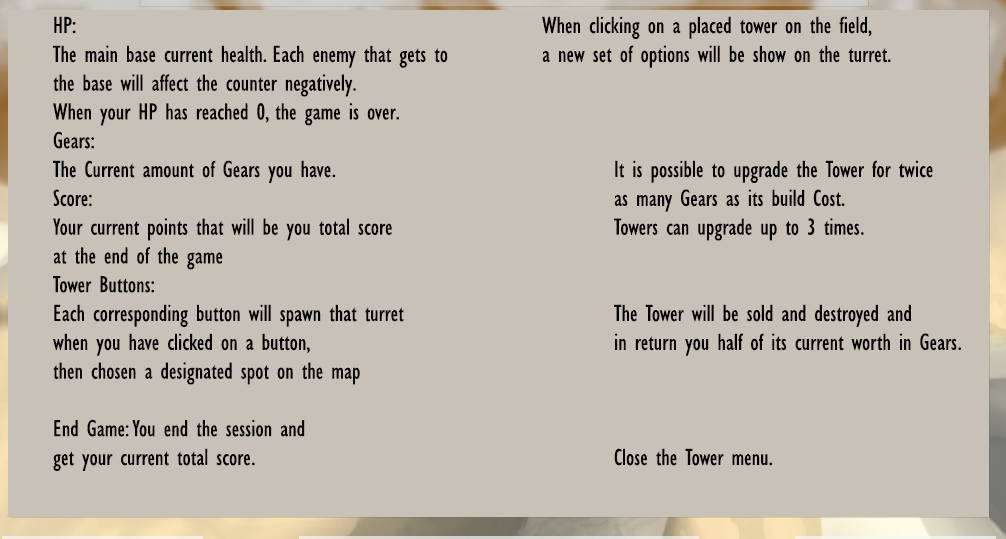
<style>
.page{position:relative;width:1006px;height:539px;background:#c8c1b7}
.page>*{position:absolute;margin:0}
.t1{font:24px "GillSansMT-Condensed";color:#000000}
</style>
<div class="page">
<p class="t1" style="left:53px;top:16px;width:395px;height:455px">HP: <br>The main base current health. Each enemy that gets to <br>the base will affect the counter negatively. <br>When your HP has reached 0, the game is over.<br>Gears: <br>The Current amount of Gears you have.<br>Score: <br>Your current points that will be you total score<br>at the end of the game<br>Tower Buttons:<br>Each corresponding button will spawn that turret <br>when you have clicked on a button, <br>then chosen a designated spot on the map<br><br>End Game: You end the session and <br>get your current total score.</p>
<p class="t1" style="left:542px;top:16px;width:419px;height:450px">When clicking on a placed tower on the field, <br>a new set of options will be show on the turret.<br><br><br><br>  It is possible to upgrade the Tower for twice <br>  as many Gears as its build Cost. <br>  Towers can upgrade up to 3 times.<br><br><br>  The Tower will be sold and destroyed and <br>  in return you half of its current worth in Gears.   <br><br><br><br>  Close the Tower menu.</p>
</div>
